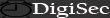
<style>
.page{position:relative;width:110px;height:18px;background:#333333}
.page>*{position:absolute;margin:0}
.t1{font:16.6px "CalifornianFB-Bold";color:#fcf9f9;scale:1.46 1}
</style>
<div class="page">
<p class="t1" style="left:32px;top:3px;width:78px;height:15px">DigiSec</p>
</div>
